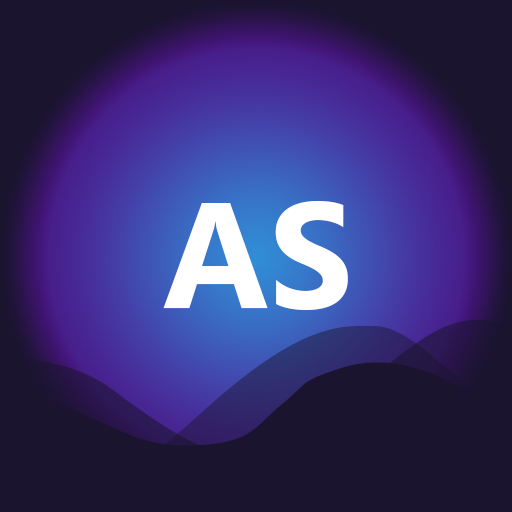
<style>
.page{position:relative;width:512px;height:512px;background:#1a142f}
.page>*{position:absolute;margin:0}
.t1{font:150px "SegoeUI-Bold";color:#ffffff}
</style>
<div class="page">
<p class="t1" style="left:163px;top:201px;width:185px;height:109px">AS</p>
</div>
